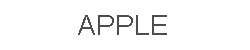
<style>
.page{position:relative;width:250px;height:50px;background:#ffffff}
.page>*{position:absolute;margin:0}
.t1{font:28.3px "ArialMT";color:#4d4d4d}
</style>
<div class="page">
<p class="t1" style="left:78px;top:15px;width:89px;height:20px">APPLE</p>
</div>
